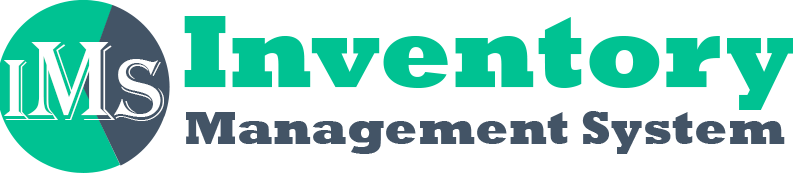
<style>
.page{position:relative;width:800px;height:173px;background:#ffffff}
.page>*{position:absolute;margin:0}
.t1{font:105px "Rockwell-ExtraBold";color:#00c292}
.t2{font:90.3px "Algerian";color:#ffffff}
.t3{font:116.8px "Algerian";color:#ffffff}
.t4{font:48px "Rockwell-ExtraBold";color:#435466}
</style>
<div class="page">
<p class="t1" style="left:184px;top:16px;width:609px;height:94px">Inventory</p>
<p class="t2" style="left:4px;top:42px;width:160px;height:79px">I<span class="t3">M</span>S</p>
<p class="t4" style="left:186px;top:111px;width:599px;height:43px">Management System</p>
</div>
